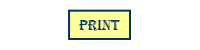
<style>
.page{position:relative;width:200px;height:50px;background:#ffffff}
.page>*{position:absolute;margin:0}
.t1{font:15px "Algerian";color:#003366}
</style>
<div class="page">
<p class="t1" style="left:79px;top:20px;width:41px;height:11px">print</p>
</div>
